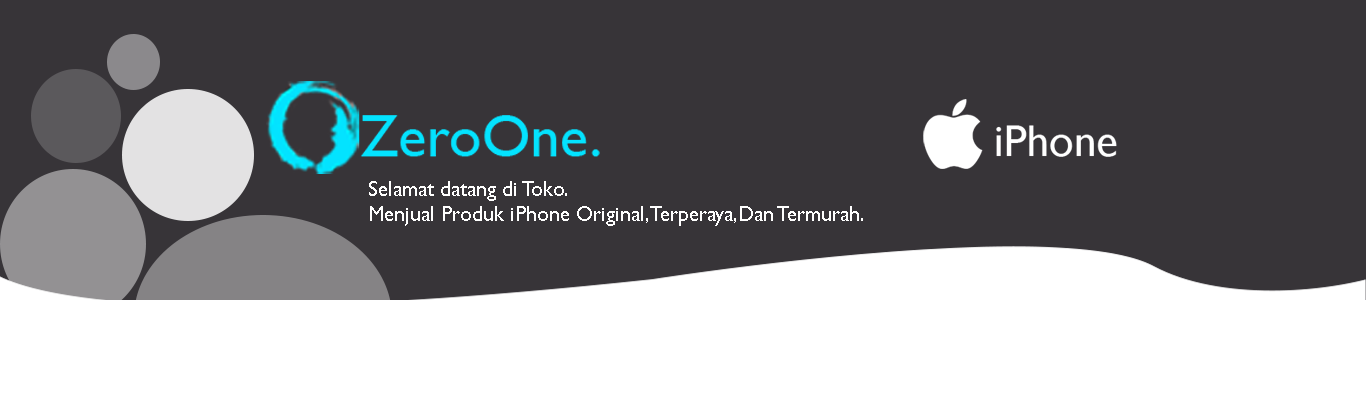
<style>
.page{position:relative;width:1366px;height:412px;background:#373438}
.page>*{position:absolute;margin:0}
.t1{font:20.8px "GillSansMT";color:#ffffff}
</style>
<div class="page">
<p class="t1" style="left:369px;top:181px;width:494px;height:45px">Selamat datang di Toko.<br>Menjual Produk iPhone Original,Terperaya,Dan Termurah.</p>
</div>
